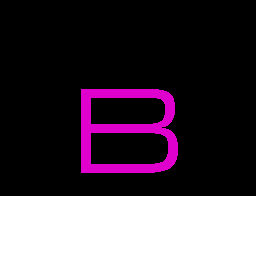
<style>
.page{position:relative;width:256px;height:256px;background:#000000}
.page>*{position:absolute;margin:0}
.t1{font:112px "Michroma";color:#df00cd}
</style>
<div class="page">
<p class="t1" style="left:81px;top:89px;width:97px;height:84px">B</p>
</div>
